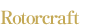
<style>
.page{position:relative;width:105px;height:27px;background:#ffffff}
.page>*{position:absolute;margin:0}
.t1{font:18px "RyuminPro-ExBold";letter-spacing:-0.08em;color:#c4a956}
</style>
<div class="page">
<p class="t1" style="left:0px;top:10px;width:80px;height:15px">Rotorcraft</p>
</div>
